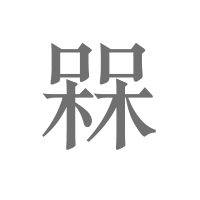
<style>
.page{position:relative;width:200px;height:200px;background:#ffffff}
.page>*{position:absolute;margin:0}
.t1{font:116.5px "STSongti-SC-Regular";color:#707070;font-weight:bold;scale:1.05 1}
</style>
<div class="page">
<p class="t1" style="left:42px;top:42px;width:114px;height:108px">槑</p>
</div>
